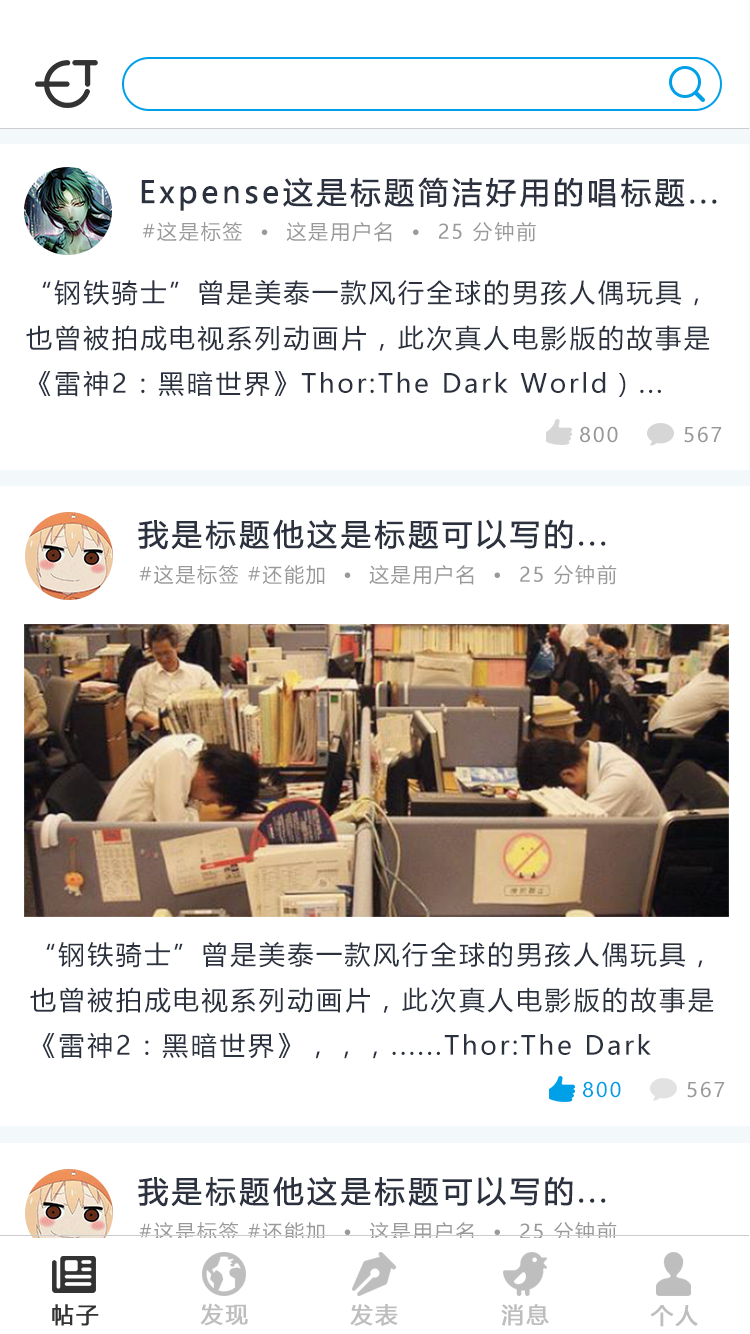
<style>
.page{position:relative;width:750px;height:1334px;background:#ffffff}
.page>*{position:absolute;margin:0}
.t1{font:30px "MicrosoftYaHei";letter-spacing:0.1em;color:#2b313f;font-weight:bold}
.t2{font:20px "MicrosoftYaHei";letter-spacing:0.1em;color:#999999}
.t3{font:26px "MicrosoftYaHei";letter-spacing:0.1em;color:#2b313f}
.t4{font:20px "MicrosoftYaHei";letter-spacing:0.1em;color:#00a0e9}
.t5{font:22px "MicrosoftYaHei";letter-spacing:0.1em;color:#35334a;font-weight:bold}
.t6{font:22px "MicrosoftYaHei";letter-spacing:0.1em;color:#bebebe;font-weight:bold}
</style>
<div class="page">
<p class="t1" style="left:141px;top:177px;width:576px;height:34px">Expense这是标题简洁好用的唱标题...</p>
<p class="t2" style="left:142px;top:222px;width:394px;height:20px">#这是标签  •  这是用户名  •  25 分钟前</p>
<p class="t3" style="left:26px;top:279px;width:684px;height:118px">“钢铁骑士”曾是美泰一款风行全球的男孩人偶玩具，也曾被拍成电视系列动画片，此次真人电影版的故事是《雷神2：黑暗世界》Thor:The Dark World）...    编剧克里斯托弗·约斯特（Christopher Yost）原创的。</p>
<p class="t2" style="left:580px;top:426px;width:38px;height:17px">800</p>
<p class="t2" style="left:684px;top:426px;width:38px;height:17px">567</p>
<p class="t1" style="left:138px;top:519px;width:468px;height:31px">我是标题他这是标题可以写的...</p>
<p class="t2" style="left:139px;top:565px;width:478px;height:20px">#这是标签 #还能加  •  这是用户名  •  25 分钟前</p>
<p class="t3" style="left:30px;top:941px;width:684px;height:118px">“钢铁骑士”曾是美泰一款风行全球的男孩人偶玩具，也曾被拍成电视系列动画片，此次真人电影版的故事是《雷神2：黑暗世界》，，，......Thor:The Dark World）编剧克里斯托弗·约斯特（Christopher Yost）原创的。</p>
<p class="t4" style="left:583px;top:1081px;width:38px;height:17px">800</p>
<p class="t2" style="left:687px;top:1081px;width:38px;height:17px">567</p>
<p class="t1" style="left:138px;top:1176px;width:468px;height:31px">我是标题他这是标题可以写的...</p>
<p class="t2" style="left:139px;top:1222px;width:478px;height:20px">#这是标签 #还能加  •  这是用户名  •  25 分钟前</p>
<p class="t5" style="left:52px;top:1304px;width:47px;height:22px">帖子</p>
<p class="t6" style="left:200px;top:1303px;width:48px;height:23px">发现</p>
<p class="t6" style="left:350px;top:1304px;width:48px;height:22px">发表</p>
<p class="t6" style="left:501px;top:1304px;width:48px;height:22px">消息</p>
<p class="t6" style="left:650px;top:1305px;width:48px;height:22px">个人</p>
</div>
